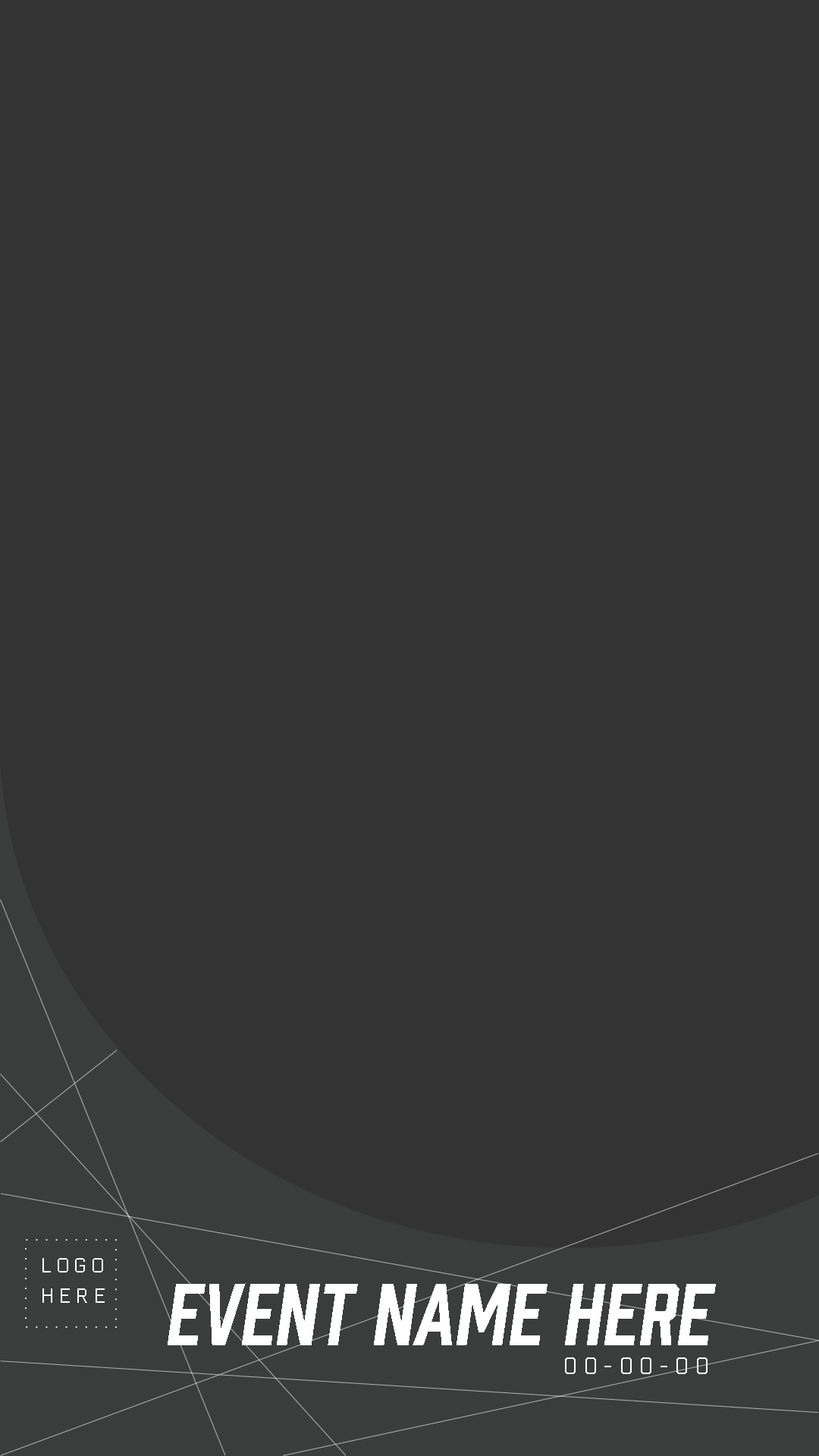
<style>
.page{position:relative;width:819px;height:1456px;background:#333333}
.page>*{position:absolute;margin:0}
.t1{font:20.3px/30.4px "Industry-Book";letter-spacing:0.23em;color:#ffffff}
.t2{font:81.1px "Prohibition-Oblique";color:#ffffff}
.t3{font:23.2px "Industry-Book";letter-spacing:0.23em;color:#ffffff}
</style>
<div class="page">
<p class="t1" style="left:42px;top:1258px;width:63px;height:45px;text-align:center">LOGO<br>HERE</p>
<p class="t2" style="left:168px;top:1283px;width:548px;height:62px">EVENT NAME HERE</p>
<p class="t3" style="left:565px;top:1357px;width:143px;height:17px">00-00-00</p>
</div>
